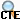
<style>
.page{position:relative;width:20px;height:20px;background:#fcfaf9}
.page>*{position:absolute;margin:0}
.t1{font:11px "BellGothicStd-Bold";letter-spacing:-0.1em;color:#000000;font-weight:bold}
</style>
<div class="page">
<p class="t1" style="left:1px;top:11px;width:20px;height:8px">CTE</p>
</div>
